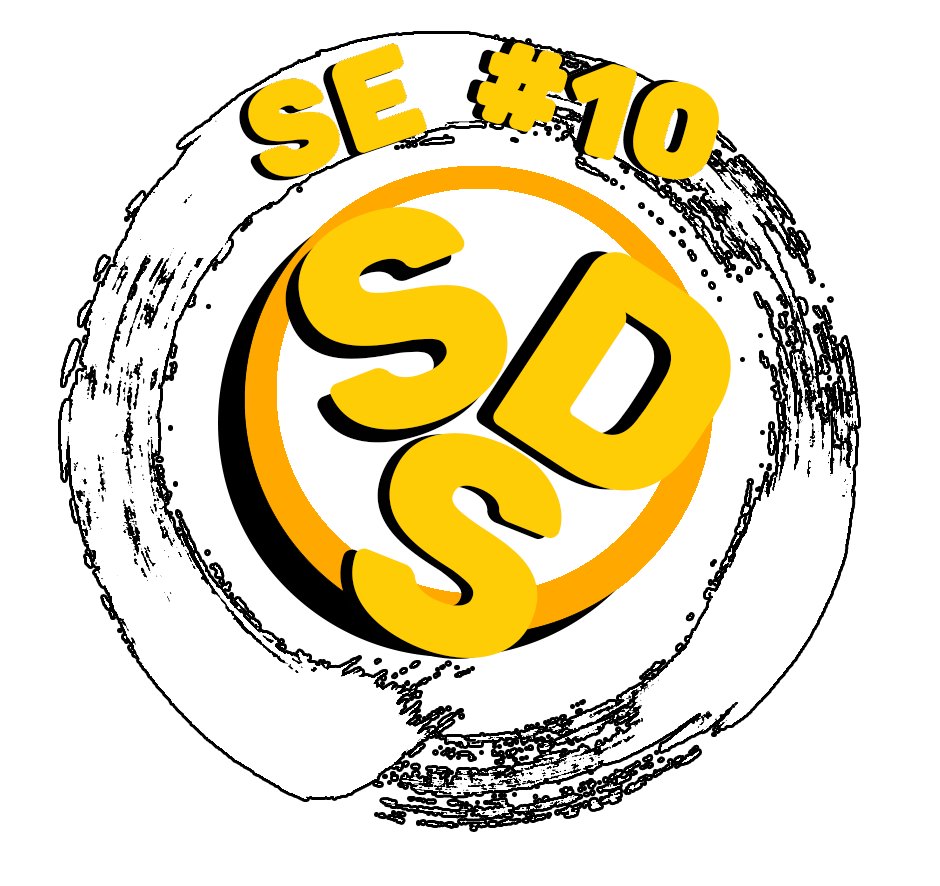
<style>
.page{position:relative;width:940px;height:886px;background:#ffffff}
.page>*{position:absolute;margin:0}
.t1{font:125px "Cunia-Bold";letter-spacing:0.02em;color:#ffcd05;font-weight:bold}
.t2{font:300px "Cunia-Bold";letter-spacing:0.02em;color:#ffcd05;font-weight:bold}
</style>
<div class="page">
<p class="t1" style="left:466px;top:40px;width:243px;height:138px;rotate:16deg">#10</p>
<p class="t1" style="left:239px;top:47px;width:179px;height:134px;rotate:-19deg">SE</p>
<p class="t1" style="left:248px;top:43px;width:179px;height:134px;rotate:-19deg">SE</p>
<p class="t1" style="left:476px;top:42px;width:243px;height:138px;rotate:16deg">#10</p>
<p class="t2" style="left:298px;top:206px;width:210px;height:224px;rotate:-21deg">S</p>
<p class="t2" style="left:285px;top:219px;width:210px;height:224px;rotate:-21deg">S</p>
<p class="t2" style="left:476px;top:251px;width:238px;height:239px;rotate:33deg">D</p>
<p class="t2" style="left:493px;top:252px;width:238px;height:239px;rotate:33deg">D</p>
<p class="t2" style="left:340px;top:434px;width:210px;height:225px;rotate:22deg">S</p>
<p class="t2" style="left:352px;top:433px;width:210px;height:225px;rotate:22deg">S</p>
</div>
